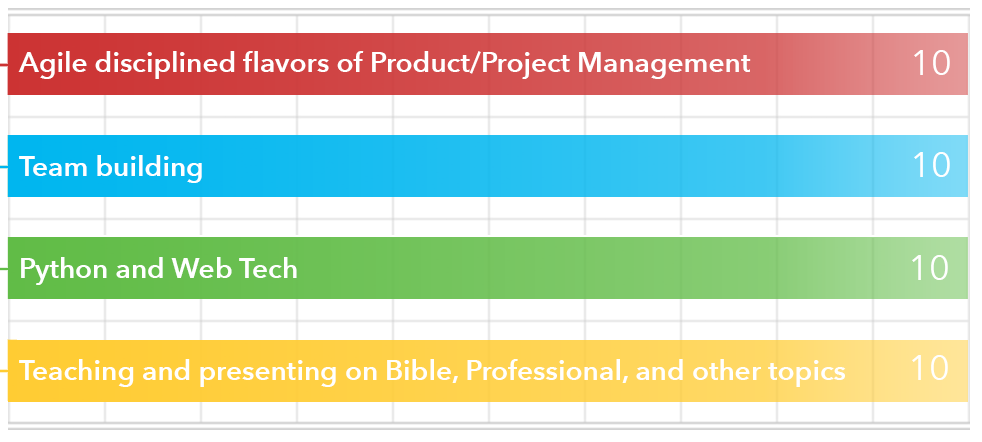
<style>
.page{position:relative;width:982px;height:442px;background:#ffffff}
.page>*{position:absolute;margin:0}
.t1{font:28px "AvenirNext-DemiBold";color:#ffffff}
.t2{font:36px "AvenirNext-Regular";color:#ffffff}
</style>
<div class="page">
<p class="t1" style="left:18px;top:51px;width:733px;height:28px">Agile disciplined flavors of Product/Project Management</p>
<p class="t2" style="left:914px;top:50px;width:36px;height:25px">10</p>
<p class="t1" style="left:19px;top:155px;width:183px;height:28px">Team building</p>
<p class="t2" style="left:914px;top:152px;width:36px;height:25px">10</p>
<p class="t1" style="left:21px;top:257px;width:276px;height:28px">Python and Web Tech</p>
<p class="t2" style="left:912px;top:255px;width:36px;height:25px">10</p>
<p class="t1" style="left:19px;top:359px;width:827px;height:28px">Teaching and presenting on Bible, Professional, and other topics</p>
<p class="t2" style="left:912px;top:355px;width:36px;height:25px">10</p>
</div>
